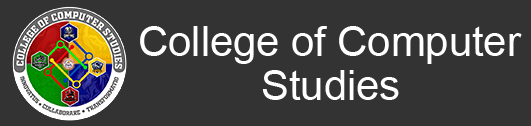
<style>
.page{position:relative;width:531px;height:126px;background:#333333}
.page>*{position:absolute;margin:0}
.t1{font:71.5px "ArialMT";color:#ffffff}
</style>
<div class="page">
<p class="t1" style="left:140px;top:26px;width:382px;height:38px">College of Computer</p>
<p class="t1" style="left:262px;top:70px;width:137px;height:30px">Studies</p>
</div>
